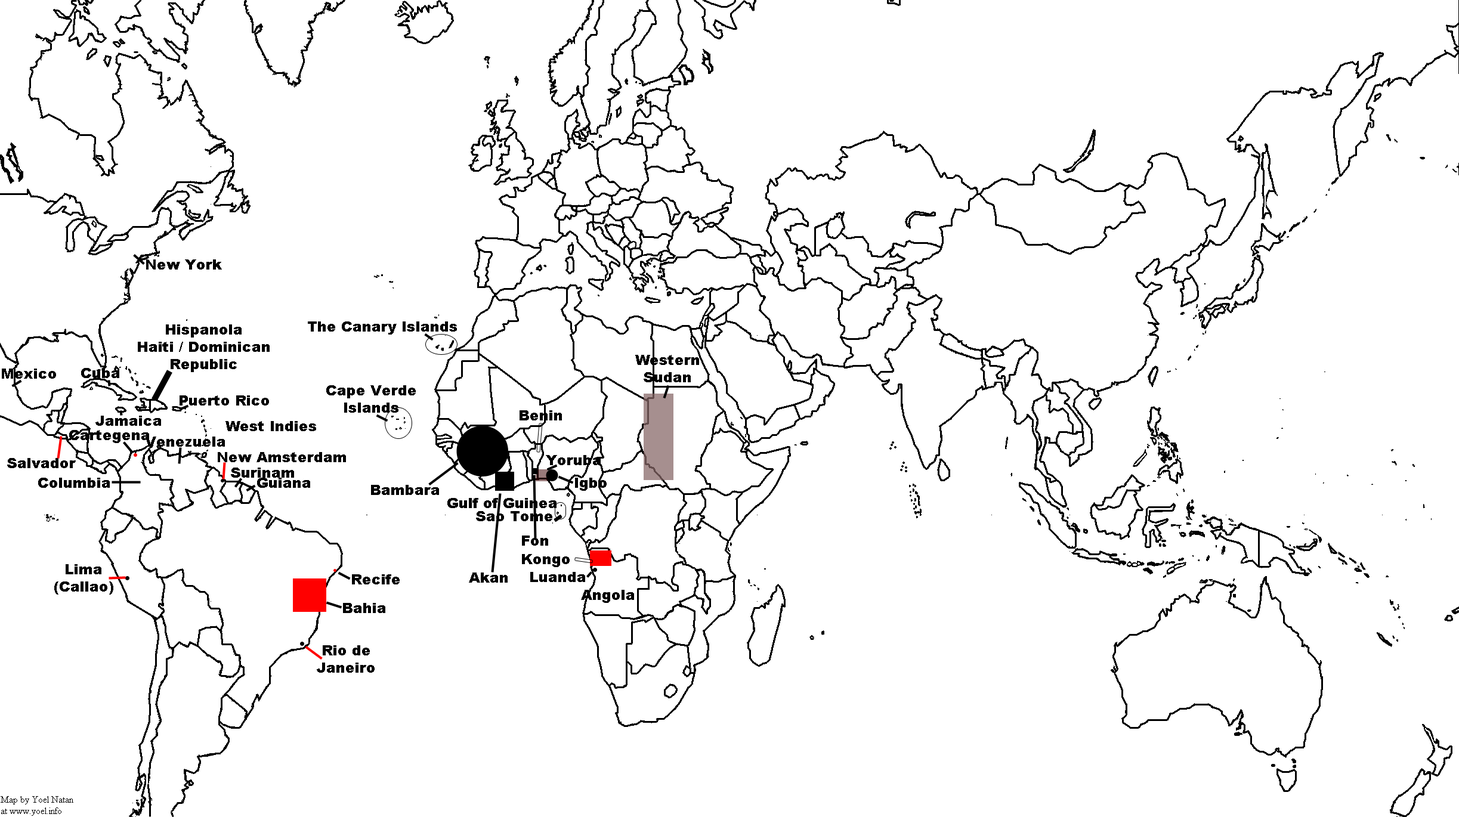
<style>
.page{position:relative;width:1459px;height:817px;background:#ffffff}
.page>*{position:absolute;margin:0}
.t1{font:14.3px "Arial-Black";color:#000000}
</style>
<div class="page">
<p class="t1" style="left:146px;top:259px;width:76px;height:11px">New York</p>
<p class="t1" style="left:138px;top:325px;width:132px;height:47px;text-align:center">Hispanola<br>Haiti / Dominican Republic</p>
<p class="t1" style="left:308px;top:322px;width:149px;height:13px">The Canary Islands</p>
<p class="t1" style="left:635px;top:355px;width:64px;height:27px;text-align:center">Western<br>Sudan</p>
<p class="t1" style="left:2px;top:369px;width:54px;height:10px">Mexico</p>
<p class="t1" style="left:81px;top:368px;width:38px;height:10px">Cuba</p>
<p class="t1" style="left:326px;top:385px;width:90px;height:28px;text-align:center">Cape Verde<br>Islands</p>
<p class="t1" style="left:180px;top:395px;width:89px;height:11px">Puerto Rico</p>
<p class="t1" style="left:520px;top:410px;width:42px;height:11px">Benin</p>
<p class="t1" style="left:95px;top:416px;width:66px;height:10px">Jamaica</p>
<p class="t1" style="left:225px;top:421px;width:91px;height:10px">West Indies</p>
<p class="t1" style="left:69px;top:430px;width:80px;height:13px">Cartegena</p>
<p class="t1" style="left:145px;top:437px;width:80px;height:10px">Venezuela</p>
<p class="t1" style="left:7px;top:458px;width:69px;height:10px">Salvador</p>
<p class="t1" style="left:218px;top:452px;width:128px;height:10px">New Amsterdam</p>
<p class="t1" style="left:546px;top:455px;width:55px;height:10px">Yoruba</p>
<p class="t1" style="left:231px;top:468px;width:63px;height:10px">Surinam</p>
<p class="t1" style="left:38px;top:478px;width:72px;height:10px">Columbia</p>
<p class="t1" style="left:257px;top:478px;width:53px;height:10px">Guiana</p>
<p class="t1" style="left:371px;top:485px;width:68px;height:10px">Bambara</p>
<p class="t1" style="left:575px;top:478px;width:32px;height:13px">Igbo</p>
<p class="t1" style="left:447px;top:498px;width:110px;height:10px">Gulf of Guinea</p>
<p class="t1" style="left:476px;top:511px;width:76px;height:10px">Sao Tome</p>
<p class="t1" style="left:522px;top:536px;width:26px;height:10px">Fon</p>
<p class="t1" style="left:522px;top:554px;width:48px;height:13px">Kongo</p>
<p class="t1" style="left:54px;top:564px;width:59px;height:31px;text-align:center">Lima<br>(Callao)</p>
<p class="t1" style="left:352px;top:574px;width:48px;height:11px">Recife</p>
<p class="t1" style="left:469px;top:573px;width:39px;height:10px">Akan</p>
<p class="t1" style="left:530px;top:572px;width:55px;height:10px">Luanda</p>
<p class="t1" style="left:581px;top:590px;width:53px;height:13px">Angola</p>
<p class="t1" style="left:343px;top:603px;width:42px;height:10px">Bahia</p>
<p class="t1" style="left:317px;top:645px;width:58px;height:28px;text-align:center">Rio de Janeiro</p>
</div>
